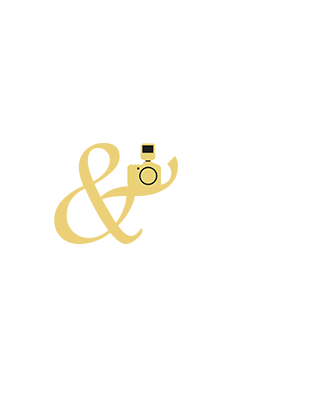
<style>
.page{position:relative;width:323px;height:409px;background:#ffffff}
.page>*{position:absolute;margin:0}
.t1{font:144px "Apple-Chancery";letter-spacing:0.1em;color:#ecd078}
</style>
<div class="page">
<p class="t1" style="left:54px;top:143px;width:124px;height:101px">&amp;</p>
</div>
